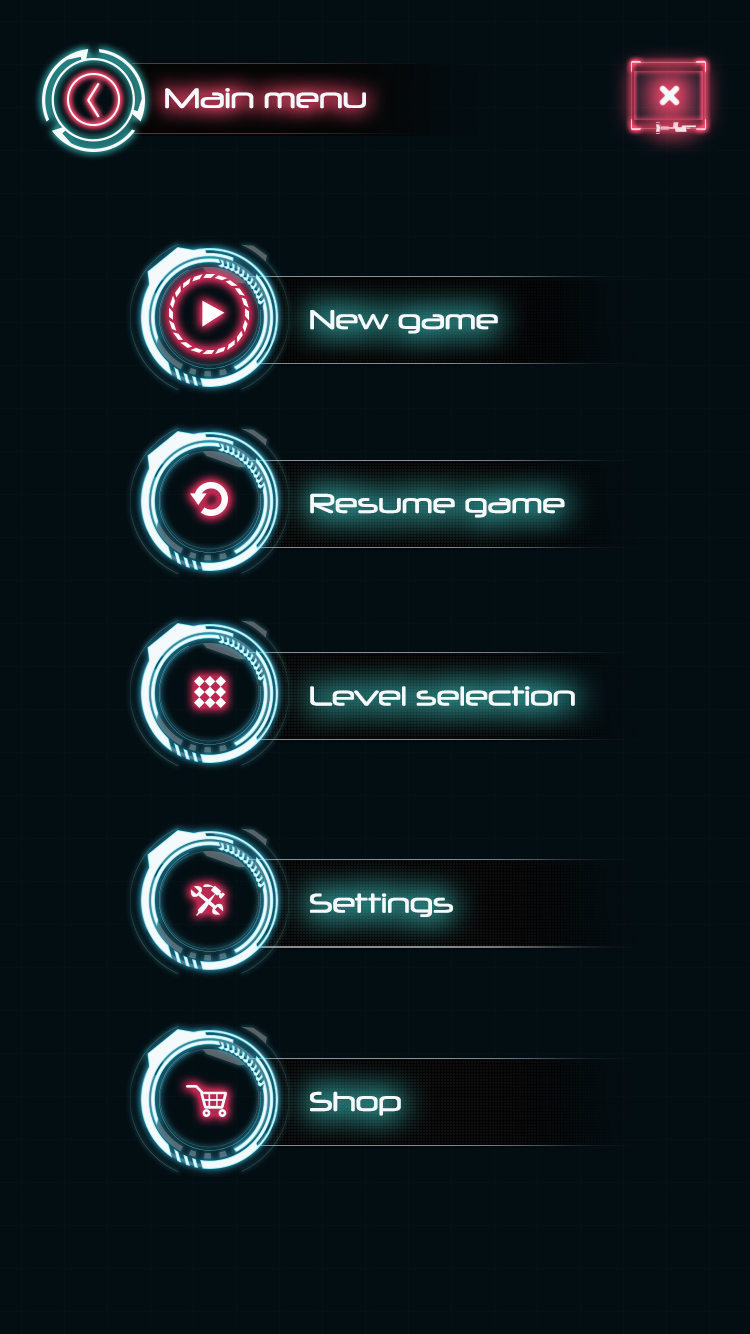
<style>
.page{position:relative;width:750px;height:1334px;background:#030e13}
.page>*{position:absolute;margin:0}
.t1{font:27.2px "Neuropol-Regular";color:#f4fafc}
.t2{font:26.3px "Neuropol-Regular";color:#f4fafc}
</style>
<div class="page">
<p class="t1" style="left:165px;top:88px;width:201px;height:21px">Main menu</p>
<p class="t2" style="left:310px;top:309px;width:188px;height:25px">New game</p>
<p class="t2" style="left:310px;top:493px;width:255px;height:25px">Resume game</p>
<p class="t2" style="left:310px;top:686px;width:265px;height:20px">Level selection</p>
<p class="t2" style="left:310px;top:893px;width:143px;height:24px">Settings</p>
<p class="t2" style="left:310px;top:1091px;width:91px;height:25px">Shop</p>
</div>
